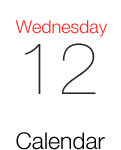
<style>
.page{position:relative;width:121px;height:150px;background:#ffffff}
.page>*{position:absolute;margin:0}
.t1{font:18px "HelveticaNeue-Light";color:#ff2828}
.t2{font:73.1px "HelveticaNeue-UltraLight";color:#232323}
.t3{font:23px "HelveticaNeue-Light";color:#000000}
</style>
<div class="page">
<p class="t1" style="left:15px;top:20px;width:92px;height:17px">Wednesday</p>
<p class="t2" style="left:25px;top:43px;width:71px;height:51px">12</p>
<p class="t3" style="left:16px;top:132px;width:89px;height:18px">Calendar</p>
</div>
